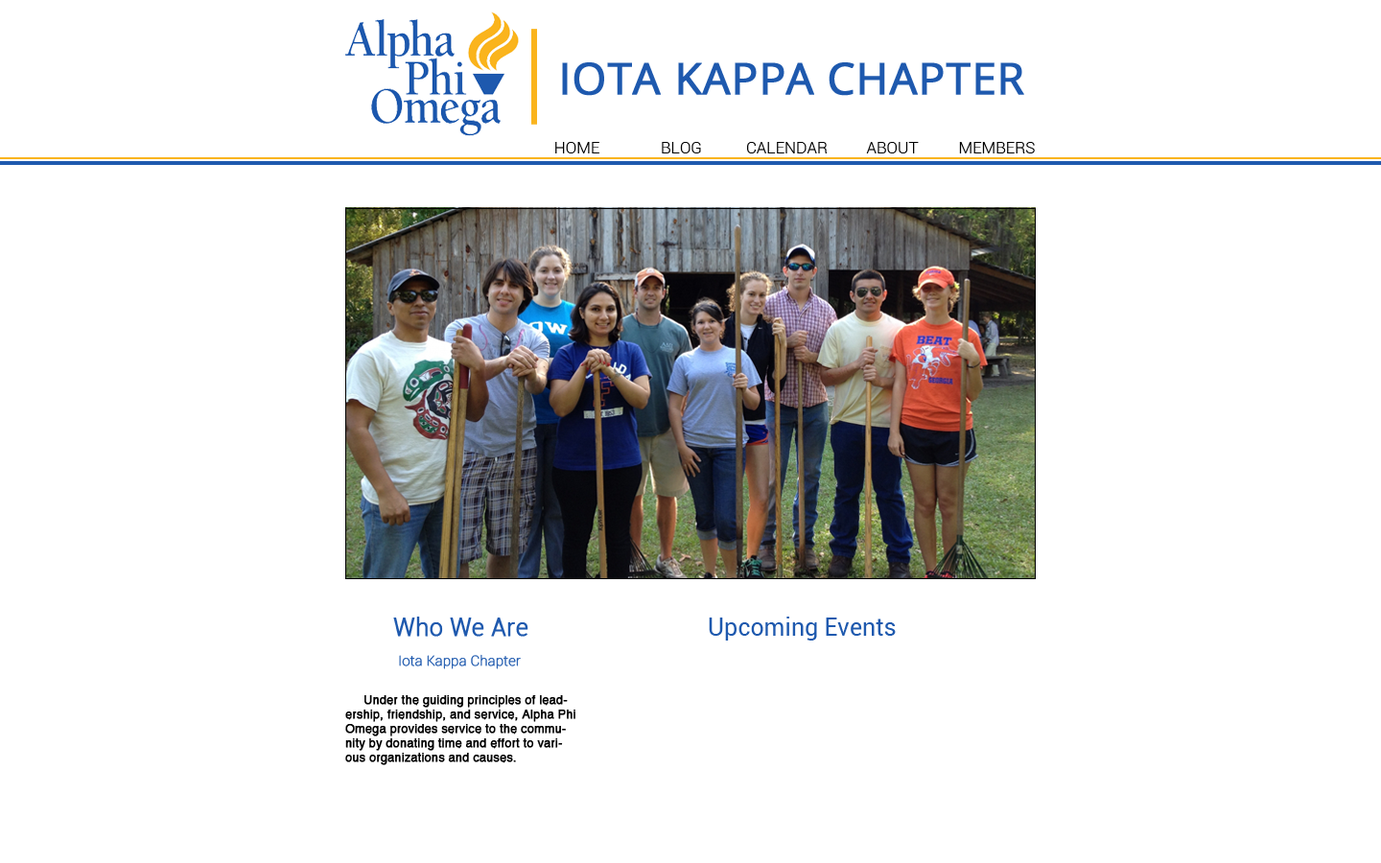
<style>
.page{position:relative;width:1381px;height:863px;background:#ffffff}
.page>*{position:absolute;margin:0}
.t1{font:43.7px "OpenSans";color:#1e59ae;font-weight:bold}
.t2{font:16.3px "Roboto-Light";color:#000000}
.t3{font:24px "Roboto-Light";color:#1e59ae;font-weight:bold}
.t4{font:24px "Roboto-Regular";color:#1e59ae}
.t5{font:14px "Roboto-Thin";color:#1e59ae;font-weight:bold}
.t6{font:12px "Helvetica";color:#000000;font-weight:bold}
</style>
<div class="page">
<p class="t1" style="left:562px;top:62px;width:462px;height:34px">IOTA KAPPA CHAPTER</p>
<p class="t2" style="left:555px;top:142px;width:45px;height:11px">HOME</p>
<p class="t2" style="left:662px;top:142px;width:39px;height:11px">BLOG</p>
<p class="t2" style="left:747px;top:142px;width:81px;height:11px">CALENDAR</p>
<p class="t2" style="left:866px;top:142px;width:53px;height:11px">ABOUT</p>
<p class="t2" style="left:959px;top:142px;width:76px;height:11px">MEMBERS</p>
<p class="t3" style="left:393px;top:617px;width:136px;height:20px">Who We Are</p>
<p class="t4" style="left:709px;top:617px;width:187px;height:24px">Upcoming Events</p>
<p class="t5" style="left:399px;top:654px;width:122px;height:16px">Iota Kappa Chapter</p>
<p class="t6" style="left:345px;top:695px;width:231px;height:70px">Under the guiding principles of leadership, friendship, and service, Alpha Phi Omega provides service to the community by donating time and effort to various organizations and causes.</p>
</div>
